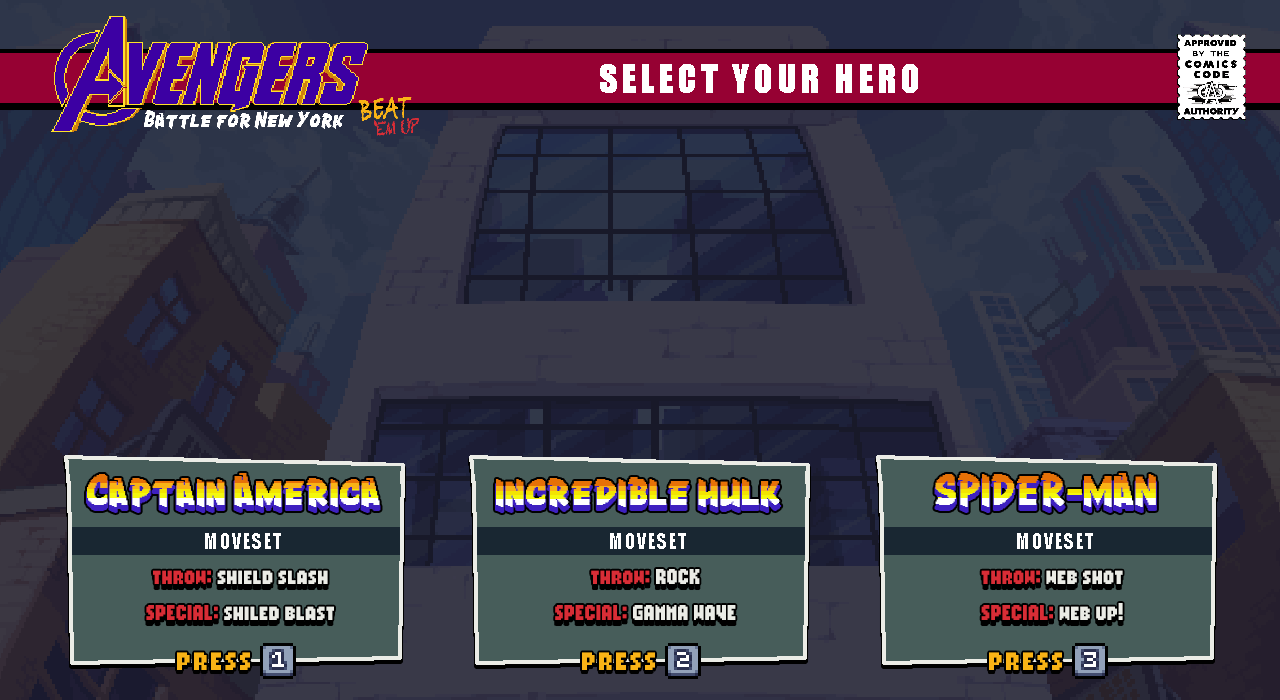
<style>
.page{position:relative;width:1280px;height:700px}
.page>*{position:absolute;margin:0}
.t1{font:35px "Impact";letter-spacing:0.1em;color:#ffffff;font-weight:bold}
.t2{font:20px "Impact";letter-spacing:0.05em;color:#ffffff}
.t3{font:15px "NutshellNews";color:#ebece6}
.t4{font:15px "NutshellNews";color:#d82d36}
.t5{font:20px "NutshellNews";letter-spacing:0.1em;color:#f9b316}
</style>
<div class="page">
<p class="t1" style="left:600px;top:64px;width:318px;height:29px">SELECT YOUR HERO</p>
<p class="t2" style="left:205px;top:533px;width:76px;height:16px">MOVESET</p>
<p class="t2" style="left:610px;top:533px;width:76px;height:16px">MOVESET</p>
<p class="t2" style="left:1017px;top:533px;width:76px;height:16px">MOVESET</p>
<p class="t3" style="left:555px;top:569px;width:181px;height:51px;text-align:center"><span class="t4">throw:</span> ROCK<br><br><span class="t4">SPECIAL:</span> GAMMA WAVE</p>
<p class="t3" style="left:146px;top:570px;width:188px;height:50px;text-align:center"><span class="t4">throw:</span> shield slash<br><br><span class="t4">SPECIAL:</span> shiled blast</p>
<p class="t3" style="left:981px;top:570px;width:142px;height:50px;text-align:center"><span class="t4">throw:</span> web shot<br><br><span class="t4">SPECIAL:</span> web up!</p>
<p class="t5" style="left:177px;top:652px;width:73px;height:18px">press</p>
<p class="t5" style="left:582px;top:652px;width:73px;height:18px">press</p>
<p class="t5" style="left:989px;top:652px;width:73px;height:18px">press</p>
</div>
